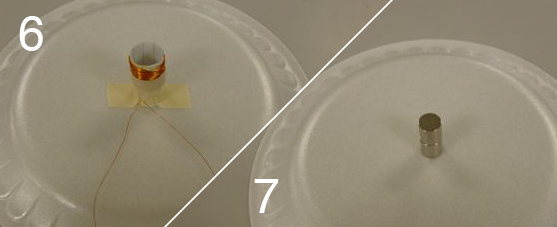
<style>
.page{position:relative;width:557px;height:227px}
.page>*{position:absolute;margin:0}
.t1{font:48px "Helvetica";color:#ffffff}
</style>
<div class="page">
<p class="t1" style="left:19px;top:16px;width:24px;height:35px">6</p>
<p class="t1" style="left:254px;top:179px;width:25px;height:34px">7</p>
</div>
